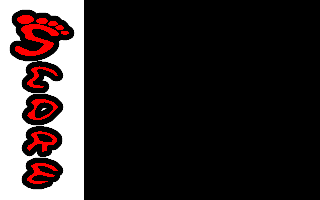
<style>
.page{position:relative;width:320px;height:200px;background:#000000}
.page>*{position:absolute;margin:0}
.t1{font:32px/32px "Feetish";color:#ff0000;scale:2 1}
.t2{font:48px/32px "Feetish";color:#ff0000;scale:2 1}
</style>
<div class="page">
<p class="t1" style="left:15px;top:15px;width:54px;height:169px;text-align:center"><span class="t2">S<br></span>c<br>o<br>r<br>e</p>
</div>
